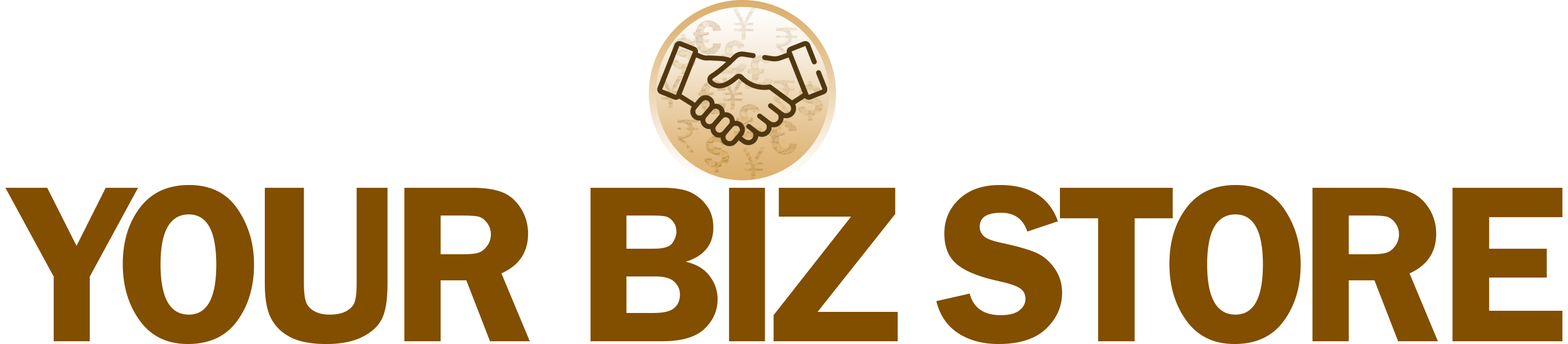
<style>
.page{position:relative;width:1568px;height:344px;background:#ffffff}
.page>*{position:absolute;margin:0}
.t1{font:49.2px "MyriadPro-Regular";color:#f0e5d7;text-transform:uppercase}
.t2{font:49.2px "FranklinGothic-Demi";text-transform:uppercase}
.t3{font:49.2px "MyriadPro-Regular";color:#d7b27a;text-transform:uppercase}
.t4{font:49.2px "MyriadPro-Regular";color:#d3a865;text-transform:uppercase}
.t5{font:230.5px "FranklinGothic-Demi";letter-spacing:-0.05em;color:#824e00;text-transform:uppercase}
</style>
<div class="page">
<p class="t1" style="left:732px;top:8px;width:24px;height:32px">¥</p>
<p class="t2" style="left:698px;top:80px;width:28px;height:34px">€</p>
<p class="t3" style="left:678px;top:120px;width:21px;height:33px">₹</p>
<p class="t4" style="left:741px;top:147px;width:25px;height:33px">¥</p>
<p class="t5" style="left:5px;top:185px;width:1557px;height:159px">Your biz store</p>
</div>
